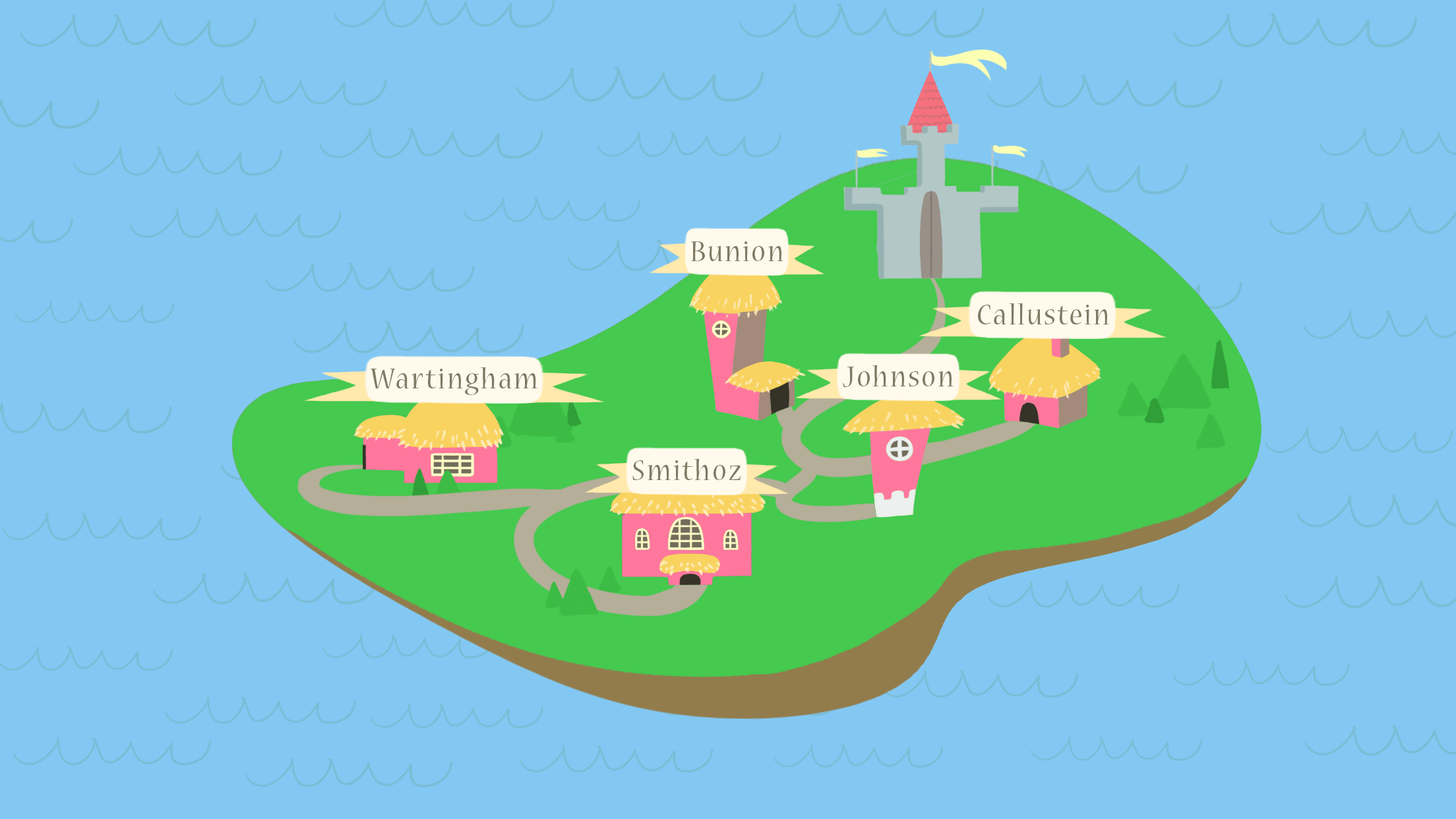
<style>
.page{position:relative;width:1456px;height:819px;background:#83c8f3}
.page>*{position:absolute;margin:0}
.t1{font:31.6px "NuevaStd-Regular";letter-spacing:0.07em;color:#807964;scale:0.9 1}
</style>
<div class="page">
<p class="t1" style="left:691px;top:241px;width:92px;height:20px">Bunion</p>
<p class="t1" style="left:978px;top:303px;width:131px;height:21px">Callustein</p>
<p class="t1" style="left:843px;top:365px;width:111px;height:22px">Johnson</p>
<p class="t1" style="left:371px;top:367px;width:166px;height:28px">Wartingham</p>
<p class="t1" style="left:632px;top:459px;width:109px;height:21px">Smithoz</p>
</div>
